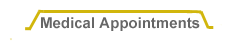
<style>
.page{position:relative;width:239px;height:42px;background:#ffffff}
.page>*{position:absolute;margin:0}
.t1{font:15px "Arial-BoldMT";color:#666666}
</style>
<div class="page">
<p class="t1" style="left:41px;top:17px;width:159px;height:14px">Medical Appointments</p>
</div>
